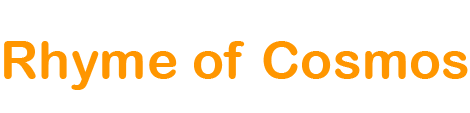
<style>
.page{position:relative;width:470px;height:113px;background:#ffffff}
.page>*{position:absolute;margin:0}
.t1{font:53.3px "ArialRoundedMTBold";color:#ff9600}
</style>
<div class="page">
<p class="t1" style="left:4px;top:41px;width:464px;height:49px">Rhyme of Cosmos</p>
</div>
